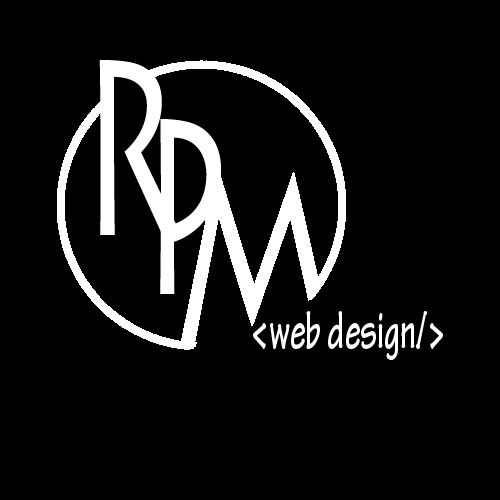
<style>
.page{position:relative;width:500px;height:500px;background:#000000}
.page>*{position:absolute;margin:0}
.t1{font:250px "LithosPro-Regular";color:#ffffff;scale:0.6 1}
.t2{font:56.2px "TektonPro-Bold";color:#ffffff;scale:0.59 1}
</style>
<div class="page">
<p class="t1" style="left:99px;top:60px;width:77px;height:179px">R</p>
<p class="t1" style="left:160px;top:119px;width:61px;height:175px">P</p>
<p class="t2" style="left:253px;top:311px;width:190px;height:49px">&lt;web design/&gt;</p>
</div>
